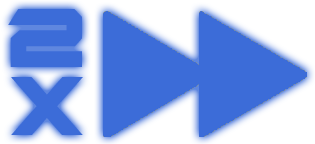
<style>
.page{position:relative;width:315px;height:144px;background:#3c6cd8}
.page>*{position:absolute;margin:0}
.t1{font:100.8px "GypsyKiller";color:#3c6cd8;scale:0.86 1}
</style>
<div class="page">
<p class="t1" style="left:8px;top:9px;width:74px;height:58px">2</p>
<p class="t1" style="left:11px;top:77px;width:72px;height:58px">X</p>
</div>
